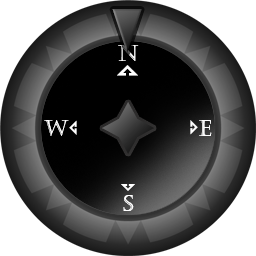
<style>
.page{position:relative;width:256px;height:256px;background:#ffffff}
.page>*{position:absolute;margin:0}
.t1{font:22.4px "Castellar";letter-spacing:0.015em}
.t2{font:22.4px "Castellar";letter-spacing:0.015em;color:#ffffff}
</style>
<div class="page">
<p class="t1" style="left:118px;top:45px;width:21px;height:16px">N</p>
<p class="t2" style="left:44px;top:120px;width:25px;height:16px">W</p>
<p class="t2" style="left:199px;top:120px;width:13px;height:16px">E</p>
<p class="t2" style="left:123px;top:195px;width:11px;height:16px">S</p>
</div>
